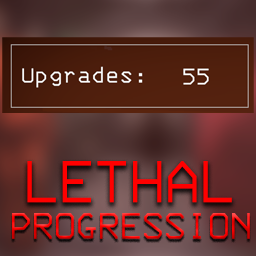
<style>
.page{position:relative;width:256px;height:256px}
.page>*{position:absolute;margin:0}
.t1{font:75.3px "3270Narrow";letter-spacing:0.04em;color:#ff0000;scale:0.88 1}
.t2{font:47.1px "3270Narrow";letter-spacing:0.04em;scale:0.88 1}
</style>
<div class="page">
<p class="t1" style="left:27px;top:161px;width:205px;height:42px">LETHAL</p>
<p class="t2" style="left:12px;top:213px;width:238px;height:26px">PROGRESSION</p>
</div>
